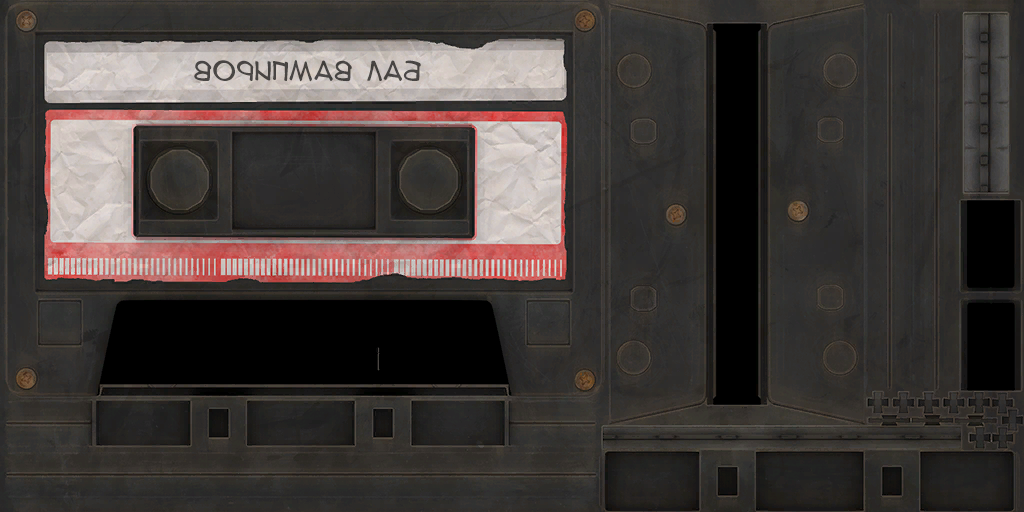
<style>
.page{position:relative;width:1024px;height:512px}
.page>*{position:absolute;margin:0}
.t1{font:24px "AnimeAcev05";color:#484543}
</style>
<div class="page">
<p class="t1" style="left:194px;top:60px;width:227px;height:22px;rotate:180deg">Бал Вампиров</p>
</div>
